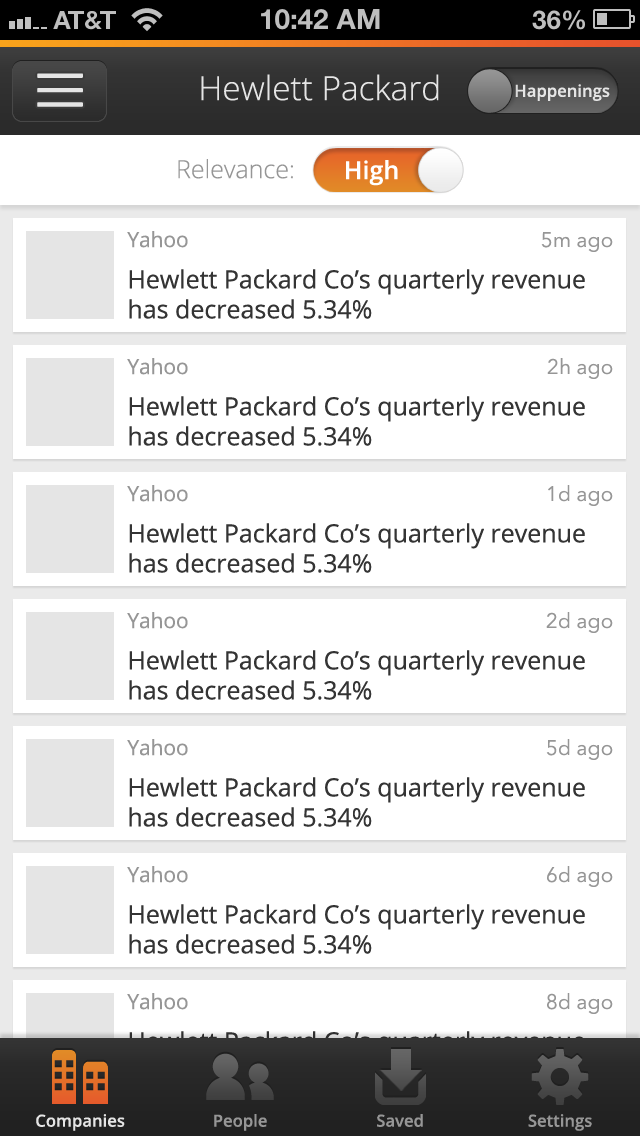
<style>
.page{position:relative;width:640px;height:1136px;background:#ffffff}
.page>*{position:absolute;margin:0}
.t1{font:33.3px "OpenSans-Light";color:#e5e5e5}
.t2{font:16.7px "OpenSans-Semibold";color:#e5e5e5}
.t3{font:25px "OpenSans-Light";color:#969696}
.t4{font:25px "OpenSans-Semibold";color:#ffffff}
.t5{font:25px "OpenSans";color:#343434}
.t6{font:20.8px "OpenSans";color:#969696}
.t7{font:20.8px "AvenirNext-Regular";color:#969696}
.t8{font:16.7px "OpenSans-Semibold";color:#969696}
</style>
<div class="page">
<p class="t1" style="left:201px;top:74px;width:238px;height:27px">Hewlett Packard</p>
<p class="t2" style="left:515px;top:84px;width:95px;height:17px">Happenings</p>
<p class="t3" style="left:178px;top:159px;width:115px;height:20px">Relevance:</p>
<p class="t4" style="left:346px;top:160px;width:52px;height:26px">High</p>
<p class="t5" style="left:127px;top:231px;width:458px;height:88px"><span class="t6">Yahoo<br></span>Hewlett Packard Co’s quarterly revenue has decreased 5.34%</p>
<p class="t7" style="left:541px;top:232px;width:72px;height:20px">5m ago</p>
<p class="t5" style="left:127px;top:358px;width:458px;height:88px"><span class="t6">Yahoo<br></span>Hewlett Packard Co’s quarterly revenue has decreased 5.34%</p>
<p class="t7" style="left:547px;top:358px;width:66px;height:21px">2h ago</p>
<p class="t5" style="left:127px;top:485px;width:458px;height:88px"><span class="t6">Yahoo<br></span>Hewlett Packard Co’s quarterly revenue has decreased 5.34%</p>
<p class="t7" style="left:548px;top:485px;width:65px;height:21px">1d ago</p>
<p class="t5" style="left:127px;top:612px;width:458px;height:88px"><span class="t6">Yahoo<br></span>Hewlett Packard Co’s quarterly revenue has decreased 5.34%</p>
<p class="t7" style="left:546px;top:612px;width:67px;height:21px">2d ago</p>
<p class="t5" style="left:127px;top:739px;width:458px;height:88px"><span class="t6">Yahoo<br></span>Hewlett Packard Co’s quarterly revenue has decreased 5.34%</p>
<p class="t7" style="left:546px;top:739px;width:67px;height:21px">5d ago</p>
<p class="t5" style="left:127px;top:866px;width:458px;height:88px"><span class="t6">Yahoo<br></span>Hewlett Packard Co’s quarterly revenue has decreased 5.34%</p>
<p class="t7" style="left:547px;top:866px;width:66px;height:21px">6d ago</p>
<p class="t7" style="left:547px;top:993px;width:66px;height:21px">8d ago</p>
<p class="t2" style="left:36px;top:1114px;width:89px;height:17px">Companies</p>
<p class="t8" style="left:214px;top:1114px;width:53px;height:17px">People</p>
<p class="t8" style="left:377px;top:1114px;width:46px;height:13px">Saved</p>
<p class="t8" style="left:528px;top:1114px;width:64px;height:17px">Settings</p>
</div>
